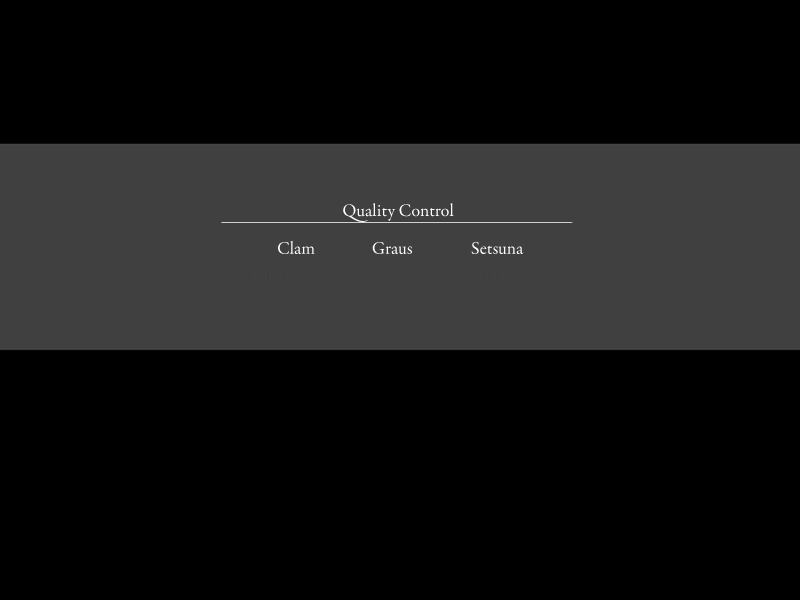
<style>
.page{position:relative;width:800px;height:600px;background:#000000}
.page>*{position:absolute;margin:0}
.t1{font:18px "GaramondPremrPro";color:#ffffff}
</style>
<div class="page">
<p class="t1" style="left:343px;top:203px;width:111px;height:19px">Quality Control</p>
<p class="t1" style="left:278px;top:240px;width:37px;height:14px">Clam</p>
<p class="t1" style="left:372px;top:242px;width:40px;height:12px">Graus</p>
<p class="t1" style="left:471px;top:242px;width:53px;height:12px">Setsuna</p>
</div>
